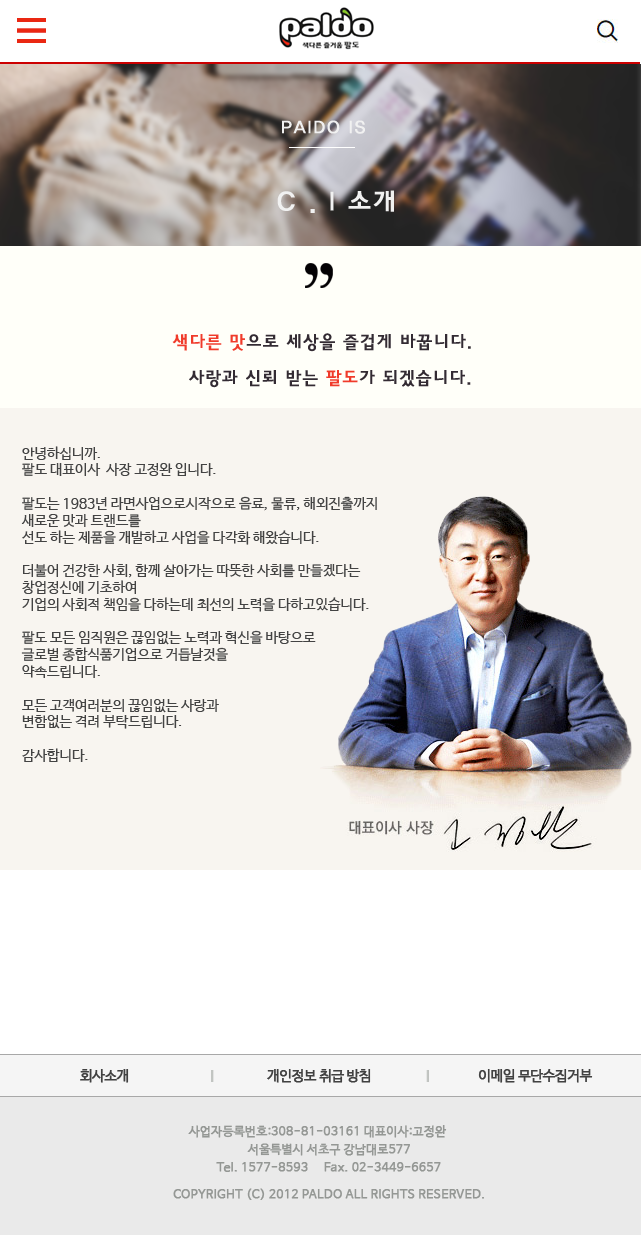
<style>
.page{position:relative;width:641px;height:1235px;background:#f8f5f0}
.page>*{position:absolute;margin:0}
.t1{font:18px "HaanYGodic23";color:#f1f1f1;font-weight:bold}
.t2{font:27px "HaanYGodic23";color:#f1f1f1;font-weight:bold}
.t3{font:18px "HaanYGodic23";color:#332b33;font-weight:bold}
.t4{font:18px "HaanYGodic23";color:#f03b2b;font-weight:bold}
.t5{font:14px "NanumBarunGothic";color:#434343}
.t6{font:14px "NanumBarunGothic";letter-spacing:-0.05em;color:#414141;font-weight:bold}
.t7{font:12px/9px "NanumBarunGothic";letter-spacing:0.005em;color:#949794;font-weight:bold}
</style>
<div class="page">
<p class="t1" style="left:282px;top:120px;width:83px;height:14px">PAIDO IS</p>
<p class="t2" style="left:277px;top:190px;width:117px;height:23px">C . I 소개</p>
<p class="t3" style="left:172px;top:333px;width:299px;height:19px"><span class="t4">색다른 맛</span>으로 세상을 즐겁게 바꿉니다.</p>
<p class="t3" style="left:189px;top:370px;width:282px;height:18px">사랑과 신뢰 받는 <span class="t4">팔도</span>가 되겠습니다.</p>
<p class="t5" style="left:21px;top:446px;width:356px;height:316px">안녕하십니까.<br>팔도 대표이사  사장 고정완 입니다.<br><br>팔도는 1983년 라면사업으로시작으로 음료, 물류, 해외진출까지 <br>새로운 맛과 트랜드를 <br>선도 하는 제품을 개발하고 사업을 다각화 해왔습니다.<br><br>더불어 건강한 사회, 함께 살아가는 따뜻한 사회를 만들겠다는 <br>창업정신에 기초하여 <br>기업의 사회적 책임을 다하는데 최선의 노력을 다하고있습니다.<br><br>팔도 모든 임직원은 끊임없는 노력과 혁신을 바탕으로 <br>글로벌 종합식품기업으로 거듭날것을 <br>약속드립니다.<br><br>모든 고객여러분의 끊임없는 사랑과 <br>변함없는 격려 부탁드립니다. <br><br>감사합니다.</p>
<p class="t6" style="left:80px;top:1069px;width:49px;height:14px">회사소개</p>
<p class="t6" style="left:267px;top:1069px;width:104px;height:14px">개인정보 취급 방침</p>
<p class="t6" style="left:478px;top:1069px;width:115px;height:14px">이메일 무단수집거부</p>
<p class="t7" style="left:173px;top:1125px;width:311px;height:75px">사업자등록번호:308-81-03161 대표이사:고정완<br><br>                                  서울특별시 서초구 강남대로577 <br> <br>                        Tel. 1577-8593     Fax. 02-3449-6657<br>   <br><br>          COPYRIGHT (C) 2012 PALDO ALL RIGHTS RESERVED.</p>
</div>
